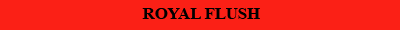
<style>
.page{position:relative;width:400px;height:30px;background:#fb2016}
.page>*{position:absolute;margin:0}
.t1{font:16.7px "TimesNewRomanPS-BoldMT";color:#000000}
</style>
<div class="page">
<p class="t1" style="left:142px;top:8px;width:118px;height:11px">ROYAL FLUSH</p>
</div>
